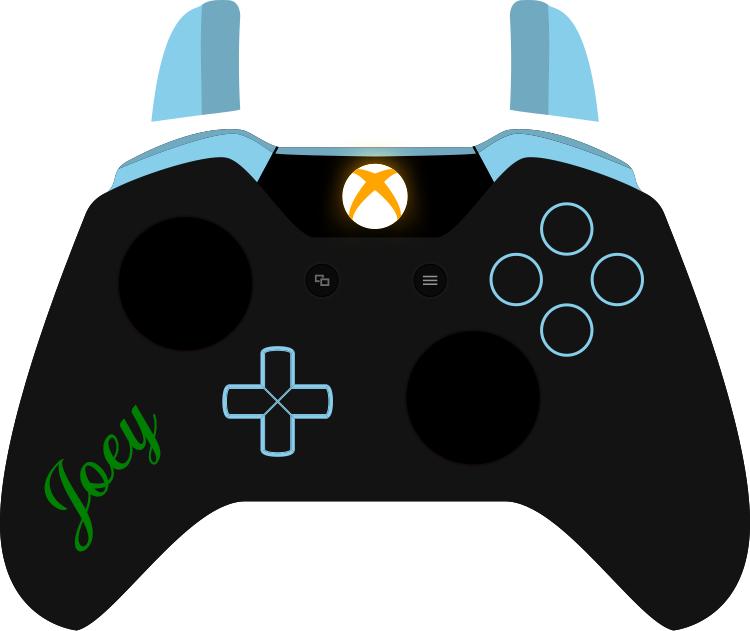
<style>
.page{position:relative;width:750px;height:631px;background:#131313}
.page>*{position:absolute;margin:0}
.t1{font:102.5px "Hopsters";color:#008000}
</style>
<div class="page">
<p class="t1" style="left:44px;top:404px;width:117px;height:148px;rotate:-50deg">Joey</p>
</div>
